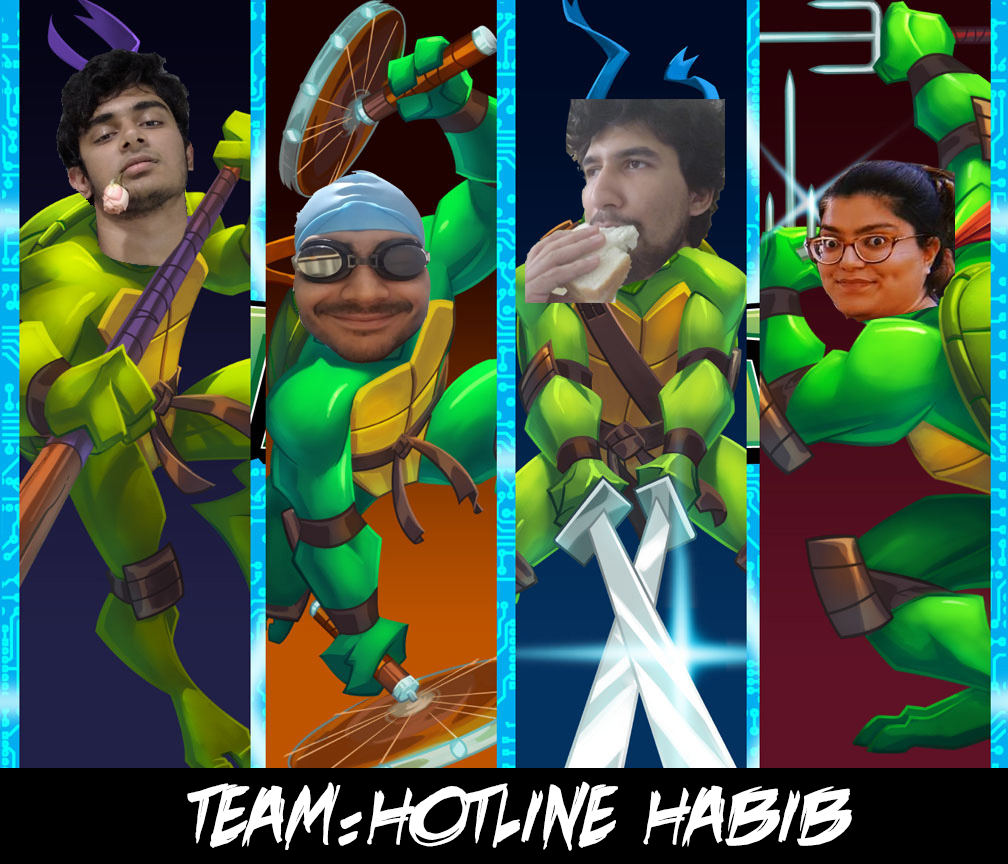
<style>
.page{position:relative;width:1008px;height:864px}
.page>*{position:absolute;margin:0}
.t1{font:100px "DeathRattleBB";color:#ffffff}
</style>
<div class="page">
<p class="t1" style="left:187px;top:781px;width:665px;height:70px">TEAM:HOTLINE HABIB</p>
</div>
